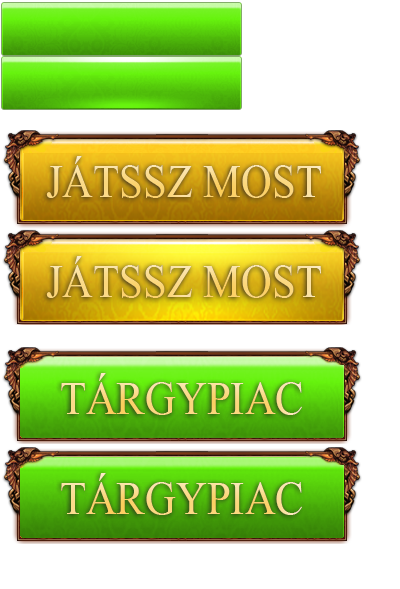
<style>
.page{position:relative;width:400px;height:589px;background:#ffffff}
.page>*{position:absolute;margin:0}
.t1{font:57.8px "Aparajita";scale:0.92 1}
</style>
<div class="page">
<p class="t1" style="left:46px;top:156px;width:275px;height:42px">JÁTSSZ MOST</p>
<p class="t1" style="left:46px;top:256px;width:275px;height:42px">JÁTSSZ MOST</p>
<p class="t1" style="left:61px;top:373px;width:241px;height:42px">TÁRGYPIAC</p>
<p class="t1" style="left:61px;top:473px;width:241px;height:42px">TÁRGYPIAC</p>
</div>
